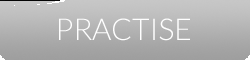
<style>
.page{position:relative;width:250px;height:60px}
.page>*{position:absolute;margin:0}
.t1{font:29.9px "Lato-Light";color:#ffffff}
</style>
<div class="page">
<p class="t1" style="left:59px;top:18px;width:131px;height:23px">PRACTISE</p>
</div>
